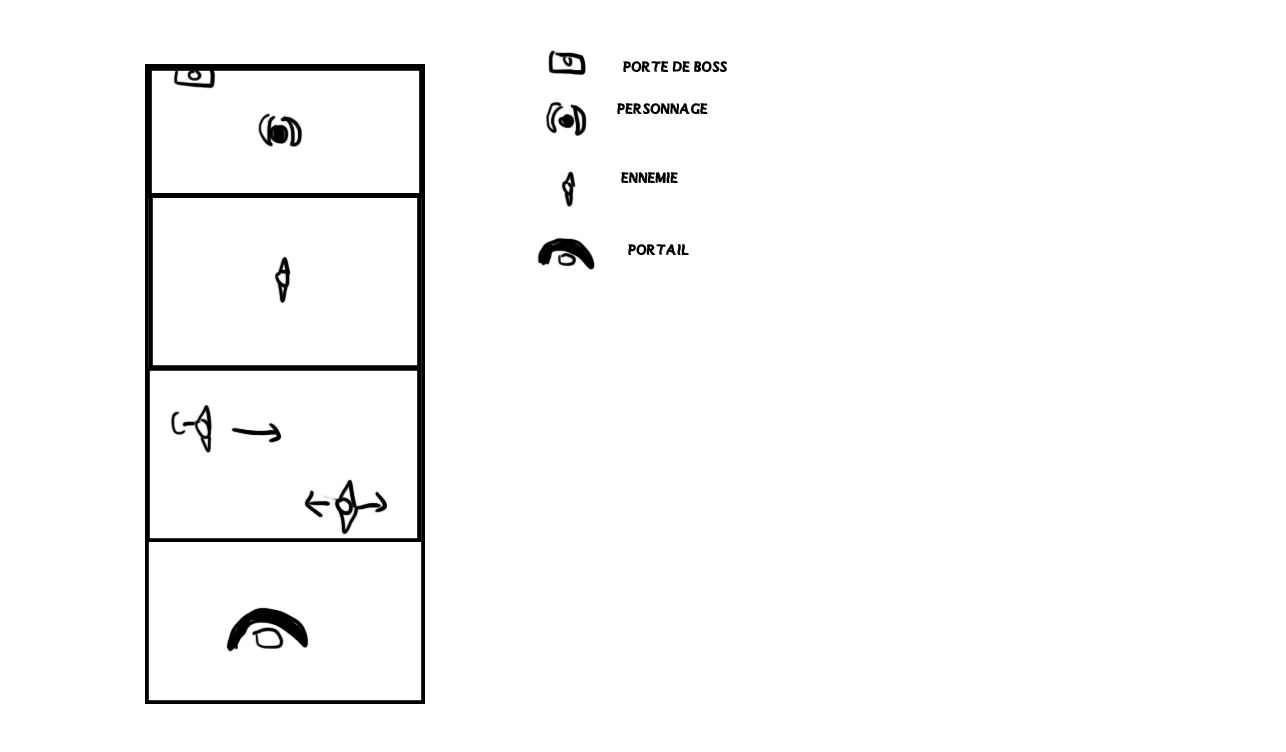
<style>
.page{position:relative;width:1286px;height:752px;background:#ffffff}
.page>*{position:absolute;margin:0}
.t1{font:15.4px "MANOLETE";color:#000000}
</style>
<div class="page">
<p class="t1" style="left:623px;top:61px;width:104px;height:11px">porte de boss</p>
<p class="t1" style="left:617px;top:103px;width:91px;height:11px">Personnage</p>
<p class="t1" style="left:621px;top:172px;width:57px;height:11px">Ennemie</p>
<p class="t1" style="left:628px;top:244px;width:61px;height:11px">Portail</p>
</div>
